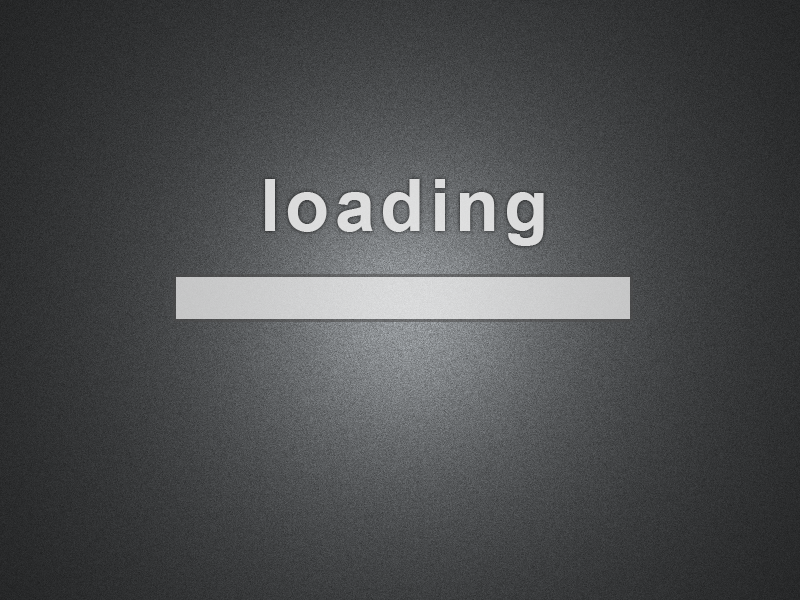
<style>
.page{position:relative;width:800px;height:600px}
.page>*{position:absolute;margin:0}
.t1{font:72px "Arial-BoldMT";letter-spacing:0.075em;color:#f4f4f4}
</style>
<div class="page">
<p class="t1" style="left:265px;top:179px;width:279px;height:67px;opacity:0.8">loading</p>
</div>
